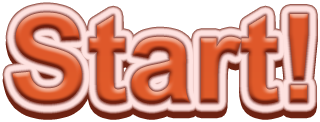
<style>
.page{position:relative;width:320px;height:122px;background:#ffffff}
.page>*{position:absolute;margin:0}
.t1{font:122.6px "Arial-BoldMT";scale:0.97 1}
</style>
<div class="page">
<p class="t1" style="left:12px;top:12px;width:296px;height:92px">Start!</p>
<p class="t1" style="left:12px;top:18px;width:296px;height:92px">Start!</p>
</div>
